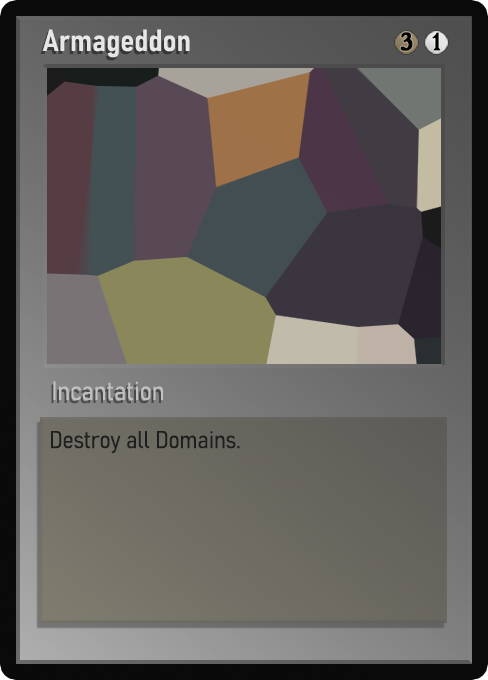
<style>
.page{position:relative;width:488px;height:680px}
.page>*{position:absolute;margin:0}
.t1{font:30px "Bahnschrift-SemiBoldSemiCondensed";color:#f2f2f2;font-weight:bold}
.t2{font:25px "WTRRoycroft";color:#000000;font-weight:bold;scale:1.09 1}
.t3{font:26px "Bahnschrift-LightSemiCondensed";color:#c8c8c8;font-weight:bold}
.t4{font:24px "Bahnschrift-LightSemiCondensed";color:#1e1e1e;font-weight:bold}
</style>
<div class="page">
<p class="t1" style="left:42px;top:29px;width:148px;height:29px;opacity:0.9">Armageddon</p>
<p class="t2" style="left:400px;top:32px;width:13px;height:19px">3</p>
<p class="t2" style="left:432px;top:32px;width:9px;height:19px">1</p>
<p class="t3" style="left:53px;top:381px;width:110px;height:20px;opacity:0.9">Incantation</p>
<p class="t4" style="left:51px;top:431px;width:189px;height:23px">Destroy all Domains.</p>
</div>
